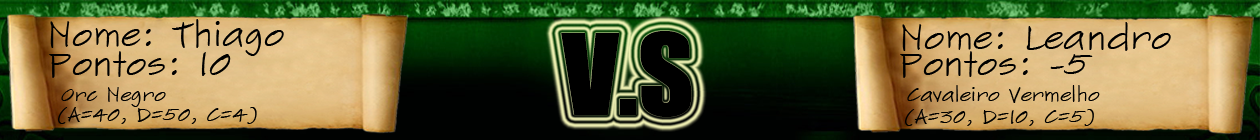
<style>
.page{position:relative;width:1260px;height:140px}
.page>*{position:absolute;margin:0}
.t1{font:35px "SketchFlowPrint";color:#000000}
.t2{font:104.4px "Impact";color:#000000;scale:1.04 1}
.t3{font:20px "SketchFlowPrint";color:#000000}
</style>
<div class="page">
<p class="t1" style="left:50px;top:19px;width:234px;height:37px">Nome: Thiago</p>
<p class="t1" style="left:902px;top:22px;width:269px;height:29px">Nome: Leandro</p>
<p class="t2" style="left:561px;top:31px;width:131px;height:86px">V.S</p>
<p class="t1" style="left:49px;top:51px;width:182px;height:27px">Pontos: 10</p>
<p class="t1" style="left:900px;top:51px;width:193px;height:27px">Pontos: -5</p>
<p class="t3" style="left:61px;top:87px;width:105px;height:20px">Orc Negro</p>
<p class="t3" style="left:907px;top:85px;width:193px;height:18px">Cavaleiro Vermelho</p>
<p class="t3" style="left:58px;top:107px;width:199px;height:17px">(A=40, D=50, C=4)</p>
<p class="t3" style="left:905px;top:109px;width:189px;height:17px">(A=30, D=10, C=5)</p>
</div>
